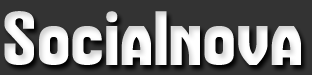
<style>
.page{position:relative;width:312px;height:75px;background:#333333}
.page>*{position:absolute;margin:0}
.t1{font:75px "DynastyMT";color:#ffffff}
</style>
<div class="page">
<p class="t1" style="left:4px;top:11px;width:297px;height:54px">Socialnova</p>
</div>
